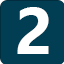
<style>
.page{position:relative;width:64px;height:64px;background:#013e54}
.page>*{position:absolute;margin:0}
.t1{font:65.6px "LeelawadeeUI-Bold";color:#ffffff}
</style>
<div class="page">
<p class="t1" style="left:17px;top:7px;width:32px;height:47px">2</p>
</div>
